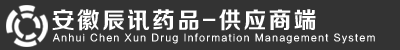
<style>
.page{position:relative;width:400px;height:50px;background:#333333}
.page>*{position:absolute;margin:0}
.t1{font:23px "FZZCHJW--GB1-0";letter-spacing:0.1em;color:#ffffff}
.t2{font:9.7px "FZLTXHK";letter-spacing:0.14em;color:#ffffff}
</style>
<div class="page">
<p class="t1" style="left:52px;top:9px;width:264px;height:22px">安徽辰讯药品-供应商端</p>
<p class="t2" style="left:52px;top:33px;width:323px;height:11px">Anhui Chen Xun Drug Information Management System</p>
</div>
